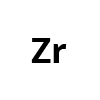
<style>
.page{position:relative;width:100px;height:100px;background:#ffffff}
.page>*{position:absolute;margin:0}
.t1{font:35px "OpenSans-Bold";color:#000000}
</style>
<div class="page">
<p class="t1" style="left:31px;top:38px;width:36px;height:25px">Zr</p>
</div>
